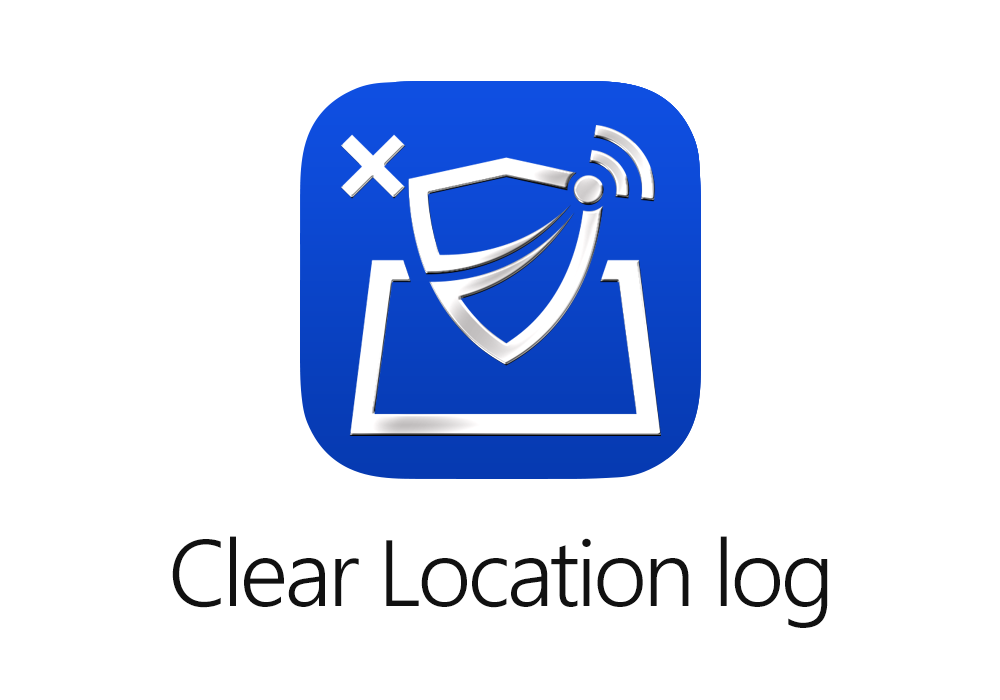
<style>
.page{position:relative;width:1000px;height:700px;background:#ffffff}
.page>*{position:absolute;margin:0}
.t1{font:94px "SegoeUI-Semilight";letter-spacing:-0.04em;color:#111111}
</style>
<div class="page">
<p class="t1" style="left:172px;top:536px;width:656px;height:92px">Clear Location log</p>
</div>
